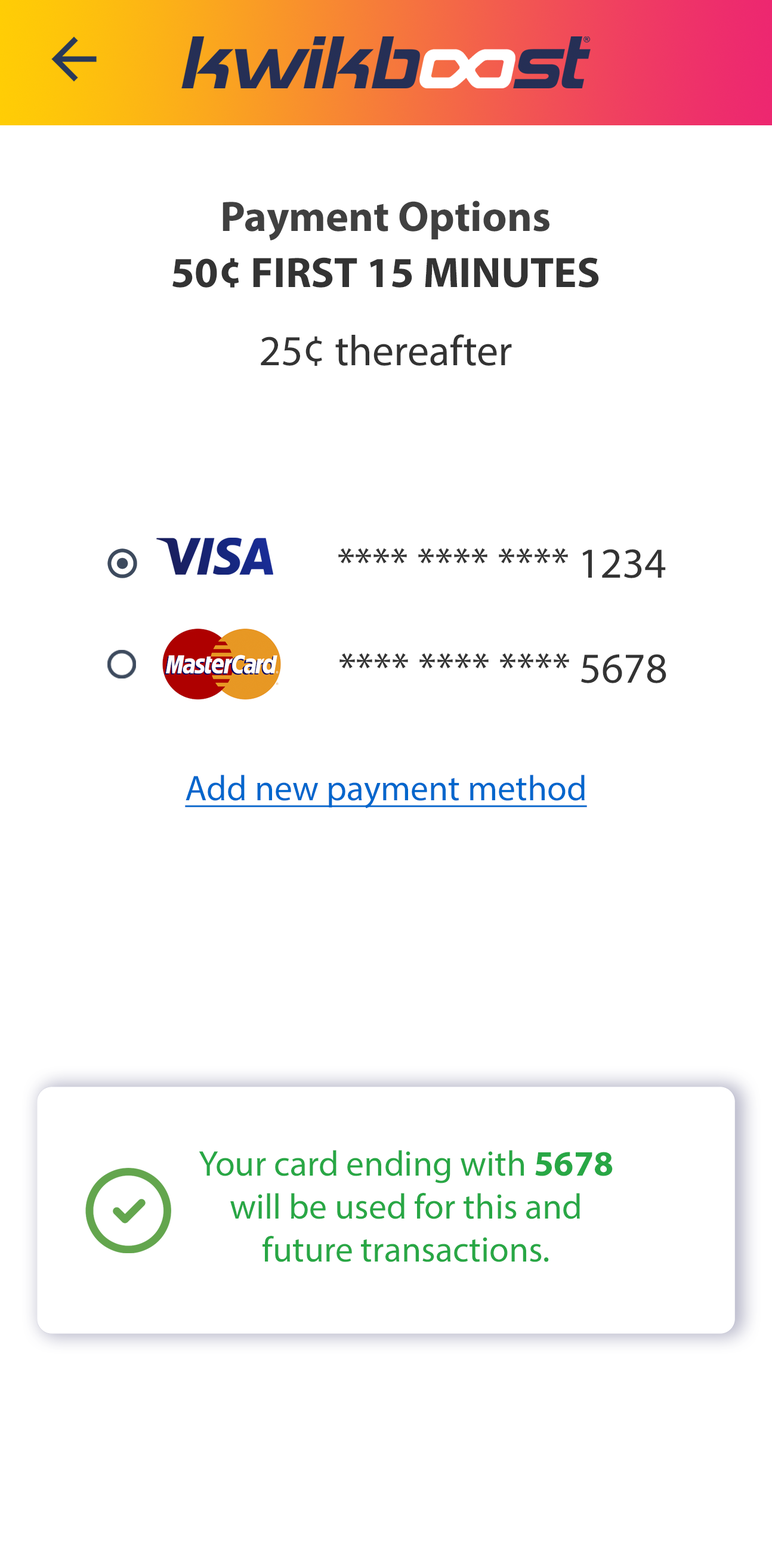
<style>
.page{position:relative;width:772px;height:1545px;background:#ffffff}
.page>*{position:absolute;margin:0}
.t1{font:43px "MyriadPro-Bold";color:#404040}
.t2{font:43px "MyriadPro-Regular";color:#333333}
.t3{font:35.8px "MyriadPro-Regular";color:#0066cc;text-decoration:underline}
.t4{font:35.8px "MyriadPro-Regular";color:#28a745}
.t5{font:35.8px "MyriadPro-Bold";color:#28a745}
</style>
<div class="page">
<p class="t1" style="left:223px;top:200px;width:326px;height:40px">Payment Options</p>
<p class="t2" style="left:338px;top:548px;width:328px;height:30px">**** **** **** 1234</p>
<p class="t2" style="left:339px;top:653px;width:327px;height:30px">**** **** **** 5678</p>
<p class="t3" style="left:185px;top:774px;width:402px;height:34px">Add new payment method</p>
<p class="t4" style="left:199px;top:1150px;width:414px;height:112px;text-align:center">Your card ending with <span class="t5">5678</span> will be used for this and future transactions.</p>
</div>
